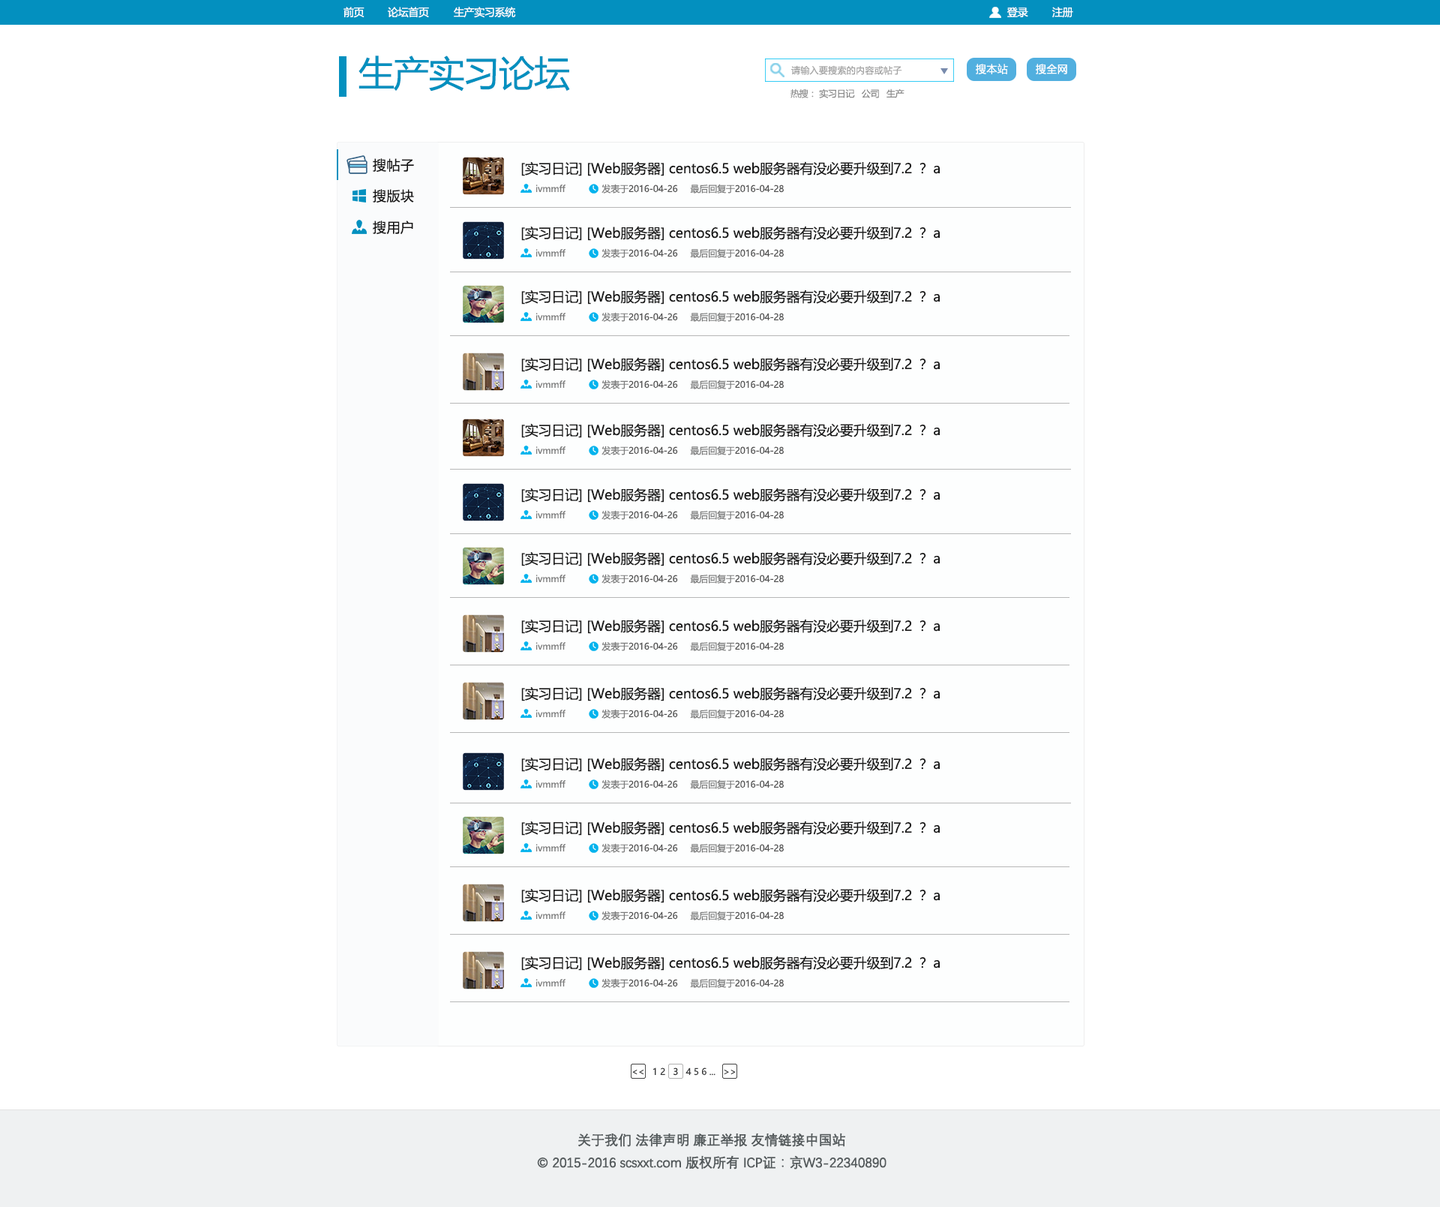
<style>
.page{position:relative;width:1440px;height:1207px;background:#ffffff}
.page>*{position:absolute;margin:0}
.t1{font:10.5px "MicrosoftYaHei";letter-spacing:-0.025em;color:#ffffff}
.t2{font:36px "MicrosoftYaHei";letter-spacing:-0.025em;color:#0390bf}
.t3{font:9px "MicrosoftYaHei";letter-spacing:0.025em;color:#a3a3a3}
.t4{font:10.5px "MicrosoftYaHei";letter-spacing:0.025em;color:#ffffff}
.t5{font:9px "MicrosoftYaHei";letter-spacing:-0.025em;color:#8a8a8a}
.t6{font:9px "MicrosoftYaHei";letter-spacing:-0.025em;color:#969696}
.t7{font:13.5px "MicrosoftYaHei";letter-spacing:0.025em;color:#141313}
.t8{font:13.5px "MicrosoftYaHei";letter-spacing:-0.01em;color:#1a1a1a}
.t9{font:9px "MicrosoftYaHei";letter-spacing:-0.01em;color:#7a7a7a}
.t10{font:9px "MicrosoftYaHei";letter-spacing:-0.01em;color:#535353}
.t11{font:9px "MicrosoftYaHei";letter-spacing:-0.01em;color:#38393a}
.t12{font:9px "MicrosoftYaHei";letter-spacing:-0.01em;color:#252626}
.t13{font:13.5px/22.5px "DengXian-Regular";letter-spacing:-0.025em;color:#545a5c;font-weight:bold}
</style>
<div class="page">
<p class="t1" style="left:344px;top:7px;width:21px;height:11px">前页</p>
<p class="t1" style="left:388px;top:7px;width:41px;height:11px">论坛首页</p>
<p class="t1" style="left:454px;top:7px;width:62px;height:11px">生产实习系统</p>
<p class="t1" style="left:1007px;top:7px;width:21px;height:10px">登录</p>
<p class="t1" style="left:1052px;top:7px;width:21px;height:11px">注册</p>
<p class="t2" style="left:359px;top:56px;width:211px;height:36px">生产实习论坛</p>
<p class="t3" style="left:791px;top:65px;width:111px;height:10px">请输入要搜索的内容或帖子</p>
<p class="t4" style="left:976px;top:64px;width:32px;height:10px">搜本站</p>
<p class="t4" style="left:1036px;top:64px;width:31px;height:10px">搜全网</p>
<p class="t5" style="left:791px;top:89px;width:114px;height:9px"><span class="t6">热搜：</span> 实习日记   公司   生产</p>
<p class="t7" style="left:373px;top:158px;width:41px;height:14px">搜帖子</p>
<p class="t8" style="left:521px;top:161px;width:419px;height:15px">[实习日记] [Web服务器] centos6.5 web服务器有没必要升级到7.2 ？ a</p>
<p class="t9" style="left:536px;top:185px;width:30px;height:7px">ivmmff</p>
<p class="t10" style="left:602px;top:184px;width:76px;height:10px"><span class="t9"> 发表于</span>2016-04-26</p>
<p class="t10" style="left:690px;top:184px;width:94px;height:10px"><span class="t9"> 最后回复于</span>2016-04-28</p>
<p class="t7" style="left:373px;top:189px;width:41px;height:14px">搜版块</p>
<p class="t7" style="left:373px;top:221px;width:40px;height:14px">搜用户</p>
<p class="t8" style="left:521px;top:226px;width:419px;height:15px">[实习日记] [Web服务器] centos6.5 web服务器有没必要升级到7.2 ？ a</p>
<p class="t9" style="left:536px;top:249px;width:30px;height:8px">ivmmff</p>
<p class="t10" style="left:602px;top:248px;width:76px;height:10px"><span class="t9"> 发表于</span>2016-04-26</p>
<p class="t10" style="left:690px;top:248px;width:94px;height:10px"><span class="t9"> 最后回复于</span>2016-04-28</p>
<p class="t8" style="left:521px;top:290px;width:419px;height:15px">[实习日记] [Web服务器] centos6.5 web服务器有没必要升级到7.2 ？ a</p>
<p class="t9" style="left:536px;top:313px;width:30px;height:7px">ivmmff</p>
<p class="t10" style="left:602px;top:312px;width:76px;height:10px"><span class="t9"> 发表于</span>2016-04-26</p>
<p class="t10" style="left:690px;top:312px;width:94px;height:10px"><span class="t9"> 最后回复于</span>2016-04-28</p>
<p class="t8" style="left:521px;top:357px;width:419px;height:15px">[实习日记] [Web服务器] centos6.5 web服务器有没必要升级到7.2 ？ a</p>
<p class="t9" style="left:536px;top:380px;width:30px;height:8px">ivmmff</p>
<p class="t10" style="left:602px;top:380px;width:76px;height:9px"><span class="t9"> 发表于</span>2016-04-26</p>
<p class="t10" style="left:690px;top:380px;width:94px;height:9px"><span class="t9"> 最后回复于</span>2016-04-28</p>
<p class="t8" style="left:521px;top:423px;width:419px;height:15px">[实习日记] [Web服务器] centos6.5 web服务器有没必要升级到7.2 ？ a</p>
<p class="t9" style="left:536px;top:446px;width:30px;height:8px">ivmmff</p>
<p class="t10" style="left:602px;top:446px;width:76px;height:9px"><span class="t9"> 发表于</span>2016-04-26</p>
<p class="t10" style="left:690px;top:446px;width:94px;height:9px"><span class="t9"> 最后回复于</span>2016-04-28</p>
<p class="t8" style="left:521px;top:488px;width:419px;height:15px">[实习日记] [Web服务器] centos6.5 web服务器有没必要升级到7.2 ？ a</p>
<p class="t9" style="left:536px;top:511px;width:30px;height:7px">ivmmff</p>
<p class="t10" style="left:602px;top:510px;width:76px;height:10px"><span class="t9"> 发表于</span>2016-04-26</p>
<p class="t10" style="left:690px;top:510px;width:94px;height:10px"><span class="t9"> 最后回复于</span>2016-04-28</p>
<p class="t8" style="left:521px;top:551px;width:419px;height:15px">[实习日记] [Web服务器] centos6.5 web服务器有没必要升级到7.2 ？ a</p>
<p class="t9" style="left:536px;top:575px;width:30px;height:7px">ivmmff</p>
<p class="t10" style="left:602px;top:574px;width:76px;height:10px"><span class="t9"> 发表于</span>2016-04-26</p>
<p class="t10" style="left:690px;top:574px;width:94px;height:10px"><span class="t9"> 最后回复于</span>2016-04-28</p>
<p class="t8" style="left:521px;top:619px;width:419px;height:15px">[实习日记] [Web服务器] centos6.5 web服务器有没必要升级到7.2 ？ a</p>
<p class="t10" style="left:602px;top:641px;width:76px;height:10px"><span class="t9"> 发表于</span>2016-04-26</p>
<p class="t10" style="left:690px;top:641px;width:94px;height:10px"><span class="t9"> 最后回复于</span>2016-04-28</p>
<p class="t9" style="left:536px;top:642px;width:30px;height:8px">ivmmff</p>
<p class="t8" style="left:521px;top:686px;width:419px;height:15px">[实习日记] [Web服务器] centos6.5 web服务器有没必要升级到7.2 ？ a</p>
<p class="t9" style="left:536px;top:710px;width:30px;height:7px">ivmmff</p>
<p class="t10" style="left:602px;top:709px;width:76px;height:10px"><span class="t9"> 发表于</span>2016-04-26</p>
<p class="t10" style="left:690px;top:709px;width:94px;height:10px"><span class="t9"> 最后回复于</span>2016-04-28</p>
<p class="t8" style="left:521px;top:757px;width:419px;height:15px">[实习日记] [Web服务器] centos6.5 web服务器有没必要升级到7.2 ？ a</p>
<p class="t9" style="left:536px;top:780px;width:30px;height:8px">ivmmff</p>
<p class="t10" style="left:602px;top:779px;width:76px;height:10px"><span class="t9"> 发表于</span>2016-04-26</p>
<p class="t10" style="left:690px;top:779px;width:94px;height:10px"><span class="t9"> 最后回复于</span>2016-04-28</p>
<p class="t8" style="left:521px;top:821px;width:419px;height:15px">[实习日记] [Web服务器] centos6.5 web服务器有没必要升级到7.2 ？ a</p>
<p class="t9" style="left:536px;top:844px;width:30px;height:7px">ivmmff</p>
<p class="t10" style="left:602px;top:843px;width:76px;height:10px"><span class="t9"> 发表于</span>2016-04-26</p>
<p class="t10" style="left:690px;top:843px;width:94px;height:10px"><span class="t9"> 最后回复于</span>2016-04-28</p>
<p class="t8" style="left:521px;top:888px;width:419px;height:15px">[实习日记] [Web服务器] centos6.5 web服务器有没必要升级到7.2 ？ a</p>
<p class="t9" style="left:536px;top:911px;width:30px;height:8px">ivmmff</p>
<p class="t10" style="left:602px;top:911px;width:76px;height:9px"><span class="t9"> 发表于</span>2016-04-26</p>
<p class="t10" style="left:690px;top:911px;width:94px;height:9px"><span class="t9"> 最后回复于</span>2016-04-28</p>
<p class="t8" style="left:521px;top:956px;width:419px;height:15px">[实习日记] [Web服务器] centos6.5 web服务器有没必要升级到7.2 ？ a</p>
<p class="t9" style="left:536px;top:979px;width:30px;height:7px">ivmmff</p>
<p class="t10" style="left:602px;top:978px;width:76px;height:10px"><span class="t9"> 发表于</span>2016-04-26</p>
<p class="t10" style="left:690px;top:978px;width:94px;height:10px"><span class="t9"> 最后回复于</span>2016-04-28</p>
<p class="t11" style="left:632px;top:1067px;width:104px;height:9px">&lt;&lt;   1 2 <span class="t12">  3 </span>  4 5 6 ...   &gt;&gt;</p>
<p class="t13" style="left:537px;top:1133px;width:350px;height:37px;text-align:center">关于我们 法律声明 廉正举报 友情链接中国站<br>© 2015-2016 scsxxt.com 版权所有 ICP证：京W3-22340890</p>
</div>
